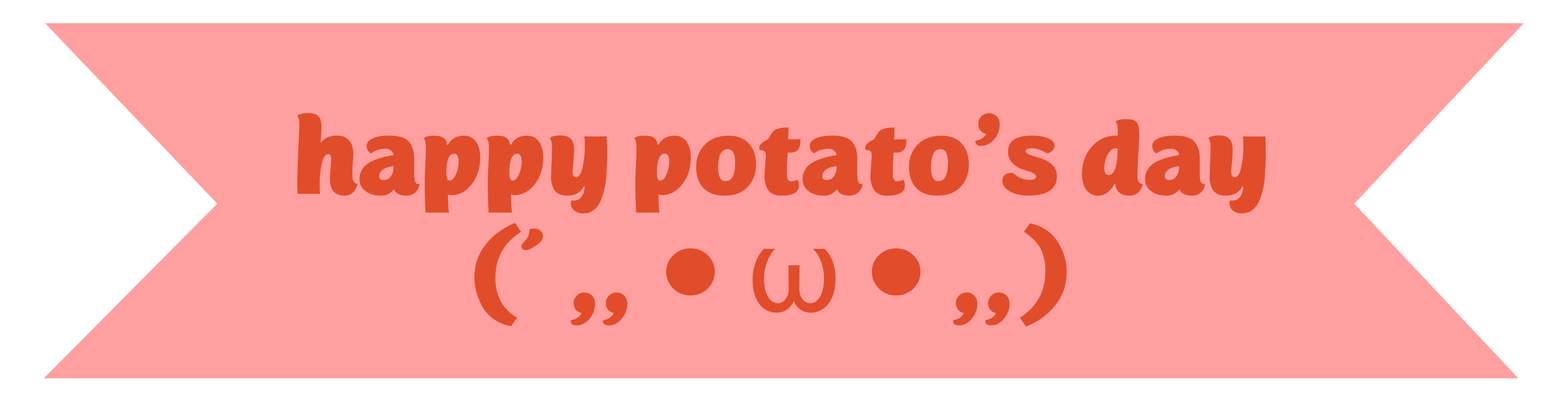
<style>
.page{position:relative;width:1568px;height:402px;background:#ff9f9f}
.page>*{position:absolute;margin:0}
.t1{font:129.6px/117.8px "iCielMijas";color:#e14d2a;scale:1.03 1}
.t2{font:129.6px/117.8px "MyriadPro-Regular";color:#e14d2a;scale:1.03 1}
</style>
<div class="page">
<p class="t1" style="left:297px;top:113px;width:969px;height:214px;text-align:center">happy potato’s day<br>(´ ,, • <span class="t2">ω</span> • ,,)</p>
</div>
